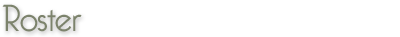
<style>
.page{position:relative;width:400px;height:37px;background:#ffffff}
.page>*{position:absolute;margin:0}
.t1{font:36.8px "BelleroseLight";color:#7c836c}
</style>
<div class="page">
<p class="t1" style="left:2px;top:4px;width:80px;height:28px">Roster</p>
</div>
